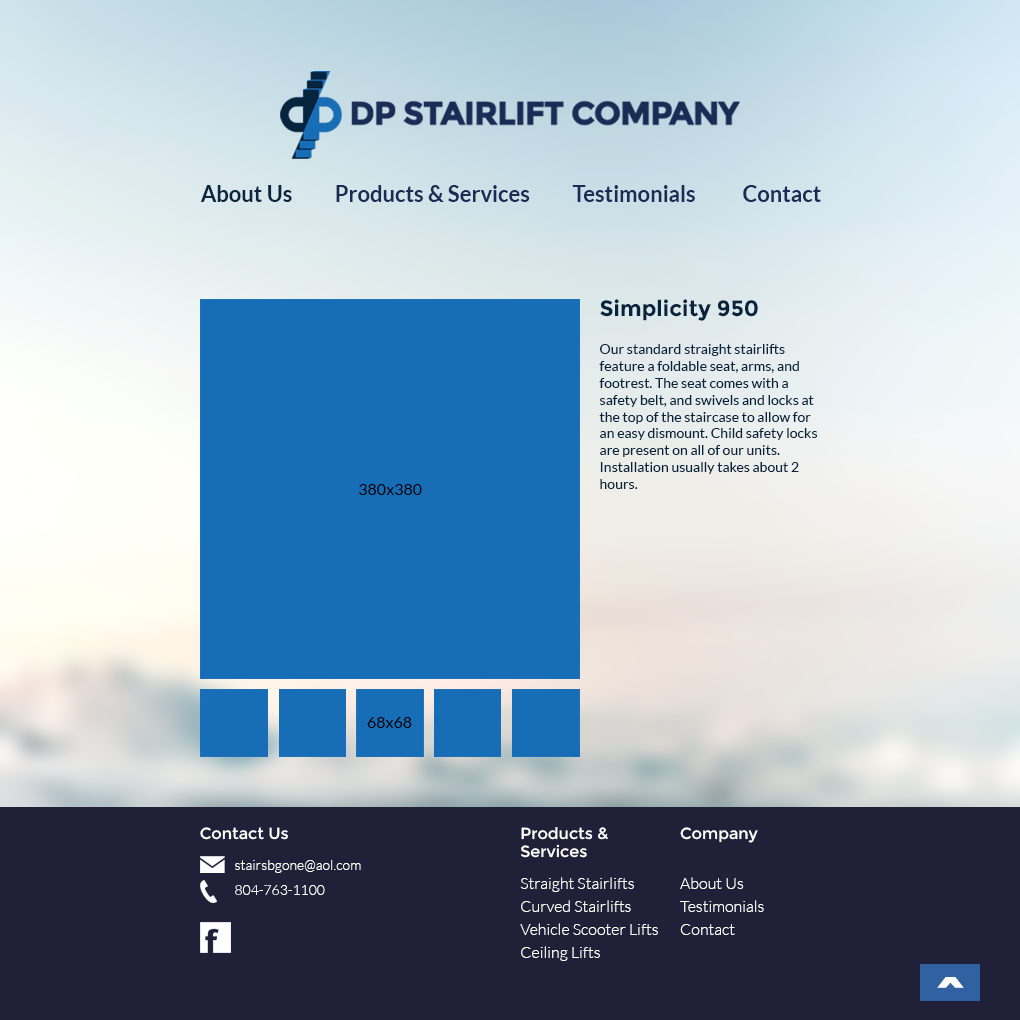
<style>
.page{position:relative;width:1020px;height:1020px}
.page>*{position:absolute;margin:0}
.t1{font:22px "Lato-Bold";color:#192c56}
.t2{font:22px "Lato-Bold";color:#092540}
.t3{font:14px "Lato-Regular";color:#07243f}
.t4{font:22px/22px "Montserrat-Bold";color:#07243f}
.t5{font:16px "Lato-Regular";color:#000000}
.t6{font:16px "Montserrat-Regular";color:#ffffff}
.t7{font:16px/23px "Lato-Light";color:#ffffff}
.t8{font:16px/20px "Montserrat-Regular";color:#ffffff}
.t9{font:16px/18px "Montserrat-Regular";color:#ffffff}
.t10{font:16px/16px "Lato-Light";color:#ffffff}
.t11{font:16px/16px "Montserrat-Regular";color:#ffffff}
.t12{font:16px/34px "Lato-Light";color:#ffffff}
.t13{font:14px/6px "Lato-Light";color:#ffffff}
.t14{font:14px/25px "Lato-Light";color:#ffffff}
.t15{font:60px "Montserrat-Bold";color:#ffffff}
</style>
<div class="page">
<p class="t1" style="left:200px;top:185px;width:621px;height:17px"><span class="t2">About Us</span>          Products &amp; Services          Testimonials           Contact</p>
<p class="t3" style="left:599px;top:299px;width:219px;height:190px"><span class="t4">Simplicity 950<br><br></span>Our standard straight stairlifts feature a foldable seat, arms, and footrest. The seat comes with a safety belt, and swivels and locks at the top of the staircase to allow for an easy dismount. Child safety locks are present on all of our units. <br>Installation usually takes about 2 hours.</p>
<p class="t5" style="left:359px;top:484px;width:63px;height:11px">380x380</p>
<p class="t5" style="left:367px;top:717px;width:45px;height:11px">68x68</p>
<p class="t6" style="left:200px;top:827px;width:88px;height:13px">Contact Us</p>
<p class="t7" style="left:520px;top:827px;width:138px;height:134px"><span class="t8">Products &amp; <br></span><span class="t9">Services<br><br></span><span class="t10">Straight Stairlifts<br></span>Curved Stairlifts<br>Vehicle Scooter Lifts<br>Ceiling Lifts</p>
<p class="t7" style="left:680px;top:827px;width:84px;height:108px"><span class="t11">Company<br><br></span><span class="t12">About Us <br></span>Testimonials<br>Contact</p>
<p class="t13" style="left:235px;top:860px;width:126px;height:35px">stairsbgone@aol.com<br><span class="t14">804-763-1100</span></p>
<p class="t15" style="left:937px;top:977px;width:27px;height:11px">^</p>
</div>
